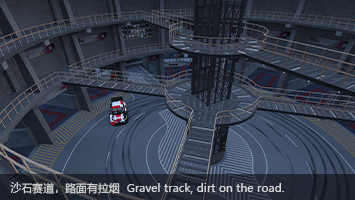
<style>
.page{position:relative;width:355px;height:200px}
.page>*{position:absolute;margin:0}
.t1{font:10.7px "MicrosoftYaHei";letter-spacing:0.025em;color:#d7d7d9}
</style>
<div class="page">
<p class="t1" style="left:10px;top:182px;width:274px;height:12px">沙石赛道，路面有拉烟  Gravel track, dirt on the road.</p>
</div>
